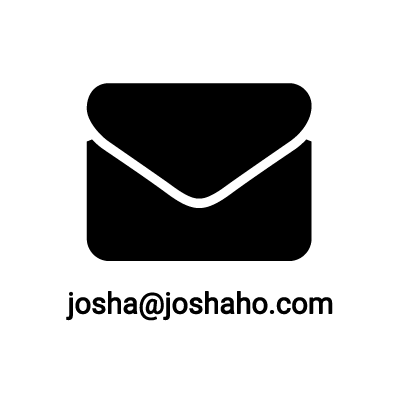
<style>
.page{position:relative;width:400px;height:400px;background:#ffffff}
.page>*{position:absolute;margin:0}
.t1{font:50px "Roboto-Regular";letter-spacing:-0.025em;color:#000000;font-weight:bold}
</style>
<div class="page">
<p class="t1" style="left:66px;top:291px;width:267px;height:30px">josha@joshaho.com</p>
</div>
